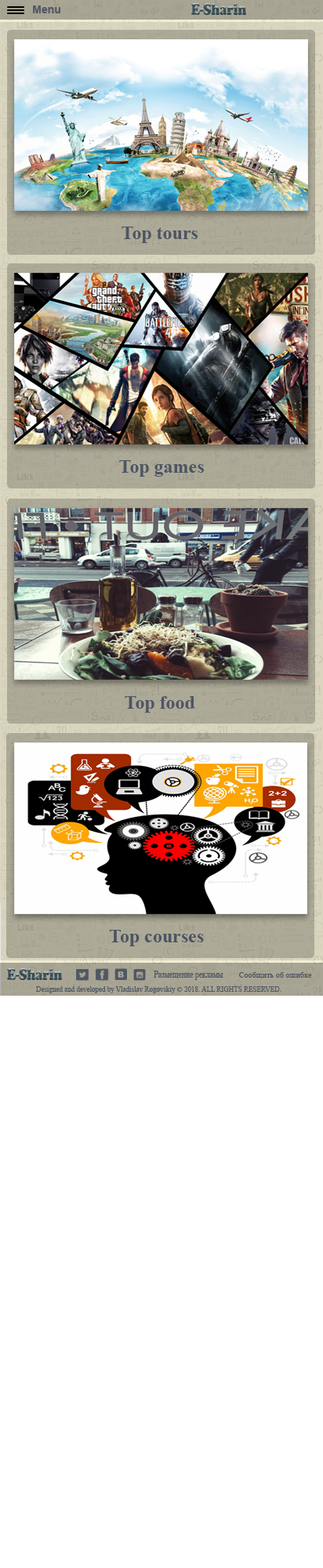
<style>
.page{position:relative;width:323px;height:1568px;background:#ffffff}
.page>*{position:absolute;margin:0}
.t1{font:18.8px "TimesNewRomanPS-BoldMT";color:#4c5563}
.t2{font:10px "TimesNewRomanPSMT";color:#4c5563;scale:0.76 1}
.t3{font:8.2px "TimesNewRomanPSMT";color:#4c5563}
.t4{font:7.1px "TimesNewRomanPSMT";color:#4c5563}
</style>
<div class="page">
<p class="t1" style="left:122px;top:227px;width:76px;height:16px">Top tours</p>
<p class="t1" style="left:119px;top:460px;width:85px;height:17px">Top games</p>
<p class="t1" style="left:125px;top:696px;width:70px;height:17px">Top food</p>
<p class="t1" style="left:109px;top:930px;width:95px;height:16px">Top courses</p>
<p class="t2" style="left:154px;top:971px;width:69px;height:9px">Размещение рекламы</p>
<p class="t3" style="left:239px;top:972px;width:73px;height:6px">Сообщить об ошибке</p>
<p class="t4" style="left:36px;top:986px;width:245px;height:7px">Designed and developed by Vladislav Rogovskiy © 2018. ALL RIGHTS RESERVED.</p>
</div>
